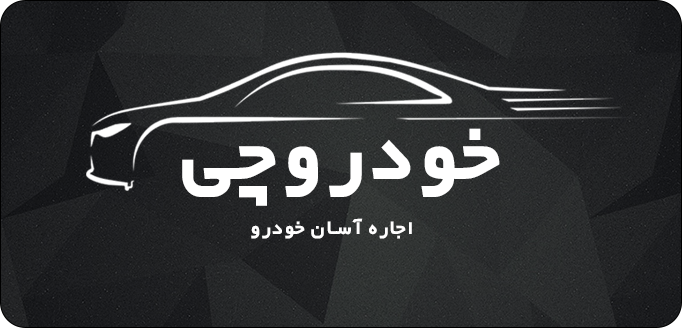
<style>
.page{position:relative;width:682px;height:328px}
.page>*{position:absolute;margin:0}
.t1{font:100px "YEKANPLUS";letter-spacing:0.04em;color:#ffffff}
.t2{font:25px "YEKANPLUS";letter-spacing:0.06em;color:#ffffff}
</style>
<div class="page">
<p class="t1" style="left:182px;top:128px;width:318px;height:78px">خودروچی</p>
<p class="t2" style="left:251px;top:218px;width:161px;height:21px">اجاره آسان خودرو</p>
</div>
